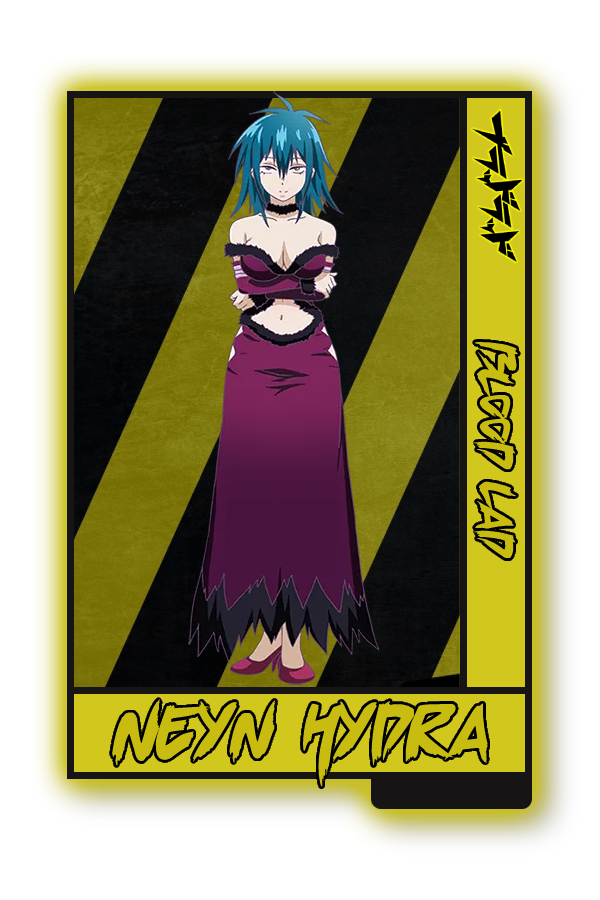
<style>
.page{position:relative;width:600px;height:900px;background:#ffffff}
.page>*{position:absolute;margin:0}
.t1{font:48.8px "ChillingSabrina";color:#c8bc10}
.t2{font:75px "ChillingSabrina";color:#c8bc10}
</style>
<div class="page">
<p class="t1" style="left:473px;top:341px;width:45px;height:218px;rotate:90deg">Blood Lad</p>
<p class="t2" style="left:112px;top:698px;width:376px;height:89px">Neyn Hydra</p>
</div>
